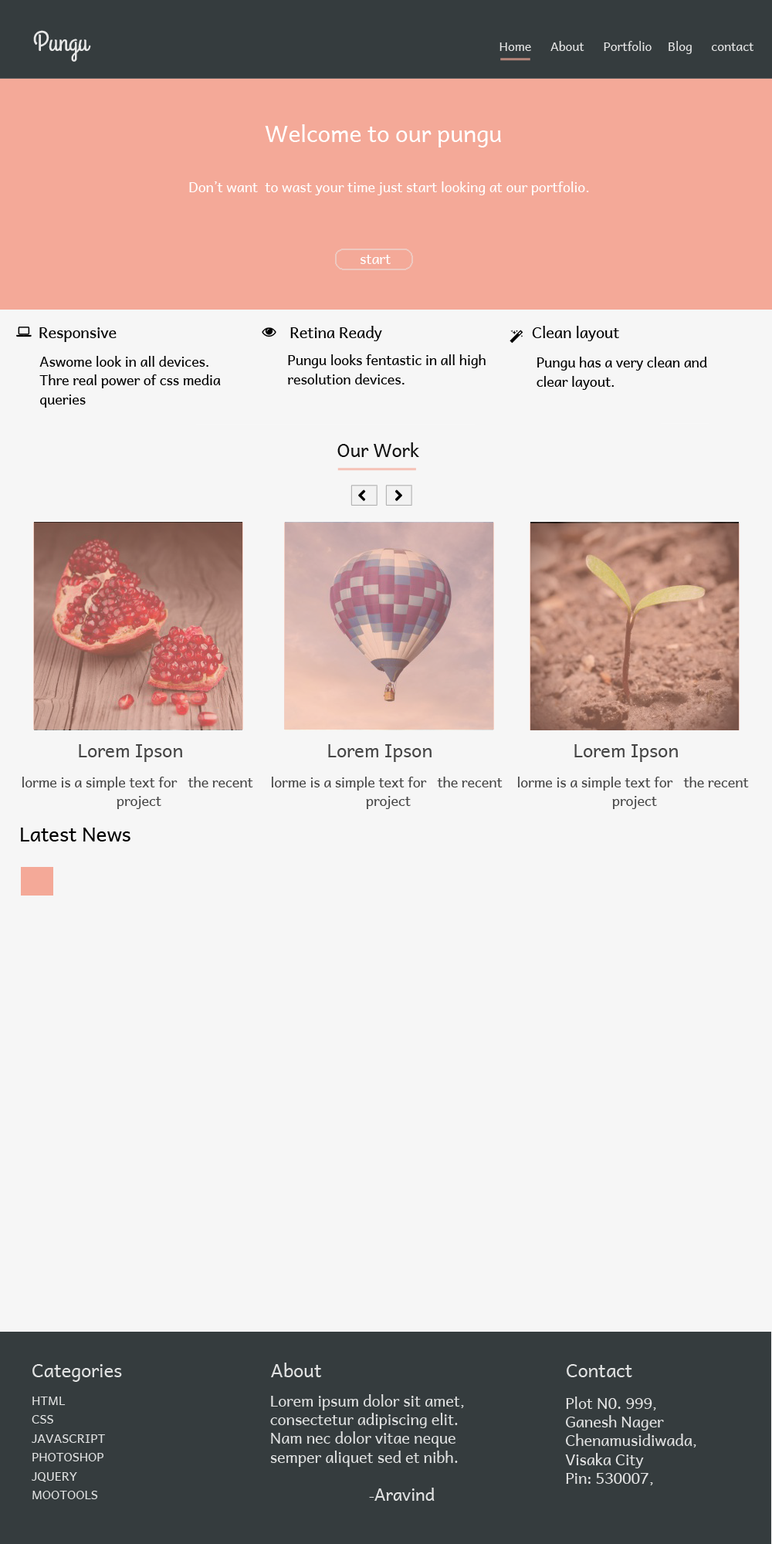
<style>
.page{position:relative;width:772px;height:1544px;background:#f6f6f6}
.page>*{position:absolute;margin:0}
.t1{font:27.8px "GrandHotel-Regular";letter-spacing:-0.01em;color:#e7e7e7}
.t2{font:12.4px "Andika";letter-spacing:-0.01em;color:#e7e7e7}
.t3{font:23.2px "Andika";letter-spacing:-0.01em;color:#ffffff}
.t4{font:13.9px "Andika";letter-spacing:-0.01em;color:#ffffff}
.t5{font:13.9px "Andika";letter-spacing:-0.01em;color:#fefefe}
.t6{font:15.4px "Andika";letter-spacing:-0.01em;color:#000000}
.t7{font:13.9px/18.8px "Andika";letter-spacing:-0.01em;color:#000000}
.t8{font:18.5px "Andika";letter-spacing:-0.01em;color:#121212}
.t9{font:18.5px "Andika";letter-spacing:-0.01em;color:#464646}
.t10{font:13.9px/18.8px "Andika";letter-spacing:-0.01em;color:#464646}
.t11{font:20.1px "Andika";letter-spacing:-0.01em;color:#000000}
.t12{font:18.5px "Andika";letter-spacing:-0.01em;color:#e1e2e2}
.t13{font:12.4px/18.8px "Andika";letter-spacing:-0.01em;color:#e1e2e2}
.t14{font:15.4px/18.8px "Andika";letter-spacing:-0.01em;color:#e1e2e2}
.t15{font:17px/18.8px "Andika";letter-spacing:-0.01em;color:#e1e2e2}
.t16{font:15.4px/18.8px "Andika";letter-spacing:-0.01em;color:#e3e3e3}
</style>
<div class="page">
<p class="t1" style="left:33px;top:30px;width:58px;height:32px">Pungu</p>
<p class="t2" style="left:500px;top:41px;width:254px;height:13px">Home      About      Portfolio     Blog      contact</p>
<p class="t3" style="left:265px;top:124px;width:236px;height:23px">Welcome to our pungu</p>
<p class="t4" style="left:189px;top:181px;width:400px;height:14px">Don’t want  to wast your time just start looking at our portfolio.</p>
<p class="t5" style="left:361px;top:255px;width:30px;height:9px">start</p>
<p class="t6" style="left:39px;top:327px;width:78px;height:15px">Responsive</p>
<p class="t6" style="left:290px;top:326px;width:92px;height:15px">Retina Ready</p>
<p class="t6" style="left:532px;top:326px;width:87px;height:15px">Clean layout</p>
<p class="t7" style="left:39px;top:356px;width:182px;height:52px">Aswome look in all devices. <br>Thre real power of css media<br>queries</p>
<p class="t7" style="left:288px;top:354px;width:198px;height:31px">Pungu looks fentastic in all high <br>resolution devices.</p>
<p class="t7" style="left:537px;top:357px;width:170px;height:33px">Pungu has a very clean and <br>clear layout.</p>
<p class="t8" style="left:337px;top:442px;width:82px;height:15px">Our Work</p>
<p class="t9" style="left:79px;top:744px;width:103px;height:18px">Lorem Ipson</p>
<p class="t9" style="left:328px;top:744px;width:104px;height:18px">Lorem Ipson</p>
<p class="t9" style="left:574px;top:744px;width:104px;height:18px">Lorem Ipson</p>
<p class="t10" style="left:22px;top:777px;width:231px;height:32px;text-align:center">lorme is a simple text for   the recent <br>project</p>
<p class="t10" style="left:272px;top:777px;width:231px;height:32px;text-align:center">lorme is a simple text for   the recent <br>project</p>
<p class="t10" style="left:518px;top:777px;width:231px;height:32px;text-align:center">lorme is a simple text for   the recent <br>project</p>
<p class="t11" style="left:21px;top:828px;width:109px;height:14px">Latest News</p>
<p class="t12" style="left:32px;top:1363px;width:600px;height:19px">Categories                               About                                                   Contact</p>
<p class="t13" style="left:32px;top:1397px;width:73px;height:103px">HTML<br>CSS<br>JAVASCRIPT<br>PHOTOSHOP<br>JQUERY<br>MOOTOOLS</p>
<p class="t14" style="left:270px;top:1395px;width:194px;height:106px">Lorem ipsum dolor sit amet, <br>consectetur adipiscing elit. <br>Nam nec dolor vitae neque <br>semper aliquet sed et nibh.<br><span class="t13"><br>                               -</span><span class="t15">Aravind</span></p>
<p class="t16" style="left:565px;top:1397px;width:131px;height:89px">Plot N0. 999,<br>Ganesh Nager<br>Chenamusidiwada,<br>Visaka City<br>Pin: 530007,</p>
</div>
